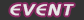
<style>
.page{position:relative;width:84px;height:20px;background:#333333}
.page>*{position:absolute;margin:0}
.t1{font:15.4px "Bauhaus";letter-spacing:0.1em;color:#e6e6e6;font-weight:bold;font-style:italic;scale:1.27 1}
</style>
<div class="page">
<p class="t1" style="left:10px;top:3px;width:64px;height:13px">EVENT</p>
</div>
